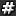
<style>
.page{position:relative;width:16px;height:16px;background:#333333}
.page>*{position:absolute;margin:0}
.t1{font:17px "Verdana-Bold";color:#ffffff;font-weight:bold}
</style>
<div class="page">
<p class="t1" style="left:2px;top:2px;width:13px;height:13px">#</p>
</div>
